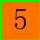
<style>
.page{position:relative;width:40px;height:40px;background:#ff7200}
.page>*{position:absolute;margin:0}
.t1{font:30px "SimSun";color:#000000}
</style>
<div class="page">
<p class="t1" style="left:14px;top:9px;width:12px;height:21px">5</p>
</div>
